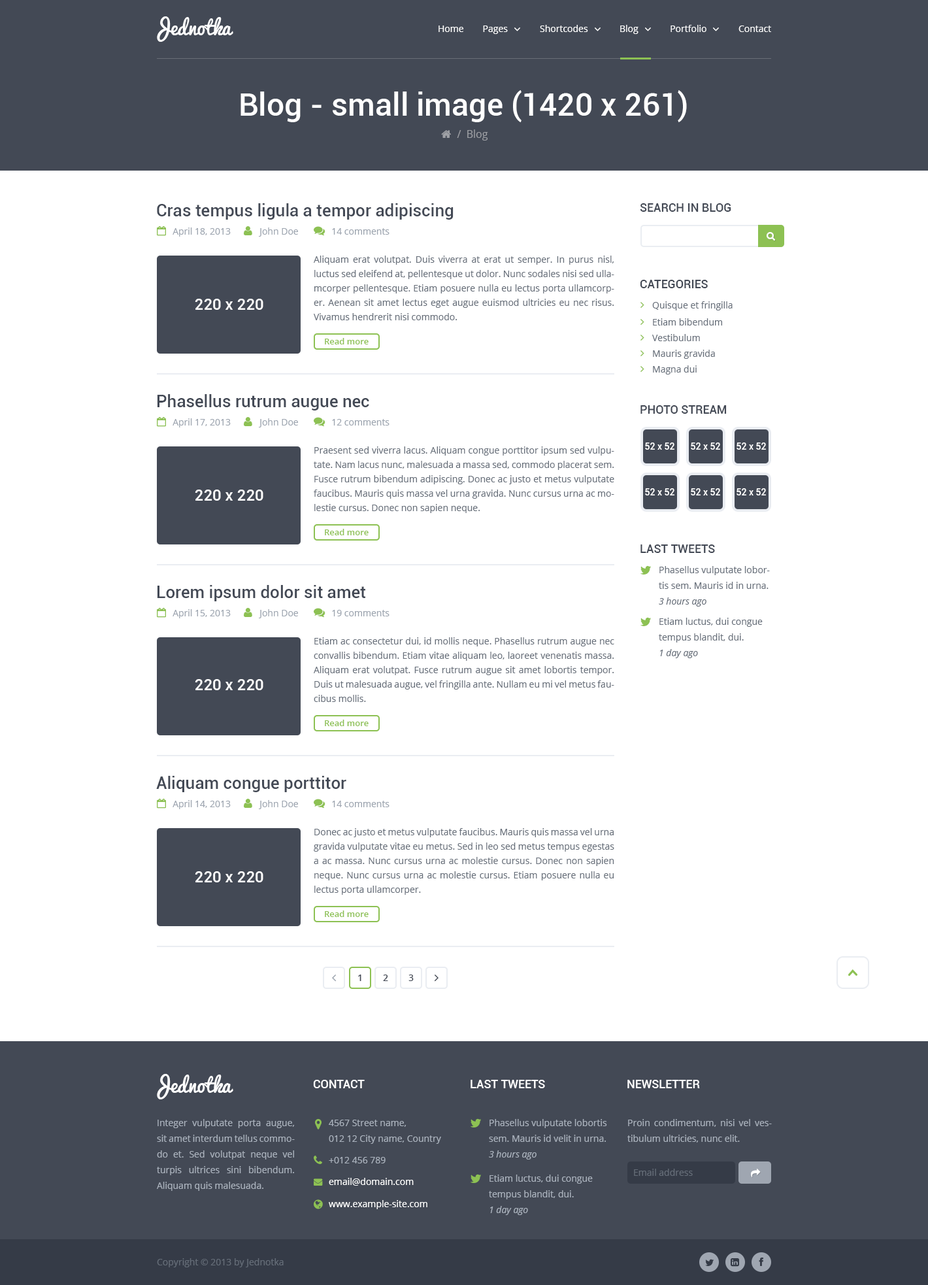
<style>
.page{position:relative;width:928px;height:1285px;background:#ffffff}
.page>*{position:absolute;margin:0}
.t1{font:19.6px "Pacifico";color:#ffffff}
.t2{font:9.1px "OpenSans";color:#ffffff}
.t3{font:31.4px "Roboto-Medium";color:#ffffff}
.t4{font:10.5px "OpenSans";color:#9fa1a6}
.t5{font:17px "Roboto-Medium";color:#434955}
.t6{font:11.8px "Roboto-Medium";color:#434955;text-transform:uppercase}
.t7{font:9.1px "OpenSans";color:#9ca4af}
.t8{font:9.1px/14.4px "OpenSans";color:#676f7a}
.t9{font:15.7px "Roboto-Medium";color:#ffffff}
.t10{font:9.1px "OpenSans";color:#676f7a}
.t11{font:8.5px "OpenSans-Semibold";color:#8dc153}
.t12{font:9.1px "Roboto-Medium";color:#ffffff}
.t13{font:9.1px/15.7px "OpenSans";color:#676f7a}
.t14{font:9.1px "OpenSans-Italic";color:#676f7a}
.t15{font:9.1px "OpenSans-Semibold";color:#434955}
.t16{font:11.8px "Roboto-Medium";color:#ffffff;text-transform:uppercase}
.t17{font:9.1px/15.7px "OpenSans";color:#aab2bd}
.t18{font:9.1px "OpenSans";color:#aab2bd}
.t19{font:9.1px "OpenSans-Italic";color:#aab2bd}
.t20{font:9.1px "OpenSans";color:#656d78}
</style>
<div class="page">
<p class="t1" style="left:157px;top:16px;width:76px;height:26px">Jednotka</p>
<p class="t2" style="left:439px;top:25px;width:24px;height:7px">Home</p>
<p class="t2" style="left:483px;top:25px;width:25px;height:9px">Pages</p>
<p class="t2" style="left:540px;top:25px;width:48px;height:7px">Shortcodes</p>
<p class="t2" style="left:620px;top:25px;width:19px;height:9px">Blog</p>
<p class="t2" style="left:671px;top:25px;width:35px;height:7px">Portfolio</p>
<p class="t2" style="left:739px;top:25px;width:32px;height:7px">Contact</p>
<p class="t3" style="left:241px;top:90px;width:446px;height:32px">Blog - small image (1420 x 261)</p>
<p class="t4" style="left:457px;top:129px;width:31px;height:12px">/  Blog</p>
<p class="t5" style="left:157px;top:203px;width:297px;height:17px">Cras tempus ligula a tempor adipiscing</p>
<p class="t6" style="left:640px;top:203px;width:91px;height:9px">Search in blog</p>
<p class="t7" style="left:173px;top:227px;width:58px;height:10px">April 18, 2013</p>
<p class="t7" style="left:259px;top:227px;width:39px;height:10px">John Doe</p>
<p class="t7" style="left:332px;top:228px;width:58px;height:7px">14 comments</p>
<p class="t8" style="left:314px;top:256px;width:300px;height:64px;text-align:justify">Aliquam erat volutpat. Duis viverra at erat ut semper. In purus nisl, luctus sed eleifend at, pellentesque ut dolor. Nunc sodales nisi sed ullamcorper pellentesque. Etiam posuere nulla eu lectus porta ullamcorper. Aenean sit amet lectus eget augue euismod ultricies eu nec risus. Vivamus hendrerit nisi commodo.</p>
<p class="t6" style="left:640px;top:280px;width:68px;height:8px">Categories</p>
<p class="t9" style="left:195px;top:299px;width:68px;height:11px">220 x 220</p>
<p class="t10" style="left:652px;top:301px;width:81px;height:9px">Quisque et fringilla</p>
<p class="t10" style="left:653px;top:318px;width:69px;height:7px">Etiam bibendum</p>
<p class="t11" style="left:325px;top:338px;width:44px;height:6px">Read more</p>
<p class="t10" style="left:652px;top:334px;width:48px;height:7px">Vestibulum</p>
<p class="t10" style="left:653px;top:350px;width:62px;height:9px">Mauris gravida</p>
<p class="t10" style="left:653px;top:365px;width:44px;height:9px">Magna dui</p>
<p class="t5" style="left:157px;top:394px;width:212px;height:16px">Phasellus rutrum augue nec</p>
<p class="t6" style="left:640px;top:405px;width:87px;height:9px">Photo stream</p>
<p class="t7" style="left:173px;top:418px;width:58px;height:9px">April 17, 2013</p>
<p class="t7" style="left:259px;top:418px;width:39px;height:9px">John Doe</p>
<p class="t7" style="left:332px;top:419px;width:58px;height:6px">12 comments</p>
<p class="t8" style="left:314px;top:446px;width:300px;height:67px;text-align:justify">Praesent sed viverra lacus. Aliquam congue porttitor ipsum sed vulputate. Nam lacus nunc, malesuada a massa sed, commodo placerat sem. Fusce rutrum bibendum adipiscing. Donec ac justo et metus vulputate faucibus. Mauris quis massa vel urna gravida. Nunc cursus urna ac molestie cursus. Donec non sapien neque.</p>
<p class="t12" style="left:645px;top:442px;width:29px;height:8px">52 x 52</p>
<p class="t12" style="left:691px;top:442px;width:29px;height:8px">52 x 52</p>
<p class="t12" style="left:737px;top:442px;width:29px;height:8px">52 x 52</p>
<p class="t9" style="left:195px;top:490px;width:68px;height:11px">220 x 220</p>
<p class="t12" style="left:645px;top:488px;width:29px;height:7px">52 x 52</p>
<p class="t12" style="left:691px;top:488px;width:29px;height:7px">52 x 52</p>
<p class="t12" style="left:737px;top:488px;width:29px;height:7px">52 x 52</p>
<p class="t11" style="left:325px;top:529px;width:44px;height:6px">Read more</p>
<p class="t6" style="left:640px;top:544px;width:75px;height:9px">Last tweets</p>
<p class="t13" style="left:659px;top:566px;width:111px;height:23px">Phasellus vulputate lobortis sem. Mauris id in urna.</p>
<p class="t5" style="left:157px;top:585px;width:209px;height:16px">Lorem ipsum dolor sit amet</p>
<p class="t14" style="left:659px;top:597px;width:47px;height:9px">3 hours ago</p>
<p class="t7" style="left:173px;top:609px;width:58px;height:9px">April 15, 2013</p>
<p class="t7" style="left:259px;top:609px;width:39px;height:9px">John Doe</p>
<p class="t7" style="left:332px;top:610px;width:58px;height:6px">19 comments</p>
<p class="t13" style="left:659px;top:618px;width:104px;height:24px">Etiam luctus, dui congue tempus blandit, dui.</p>
<p class="t8" style="left:314px;top:637px;width:300px;height:65px;text-align:justify">Etiam ac consectetur dui, id mollis neque. Phasellus rutrum augue nec convallis bibendum. Etiam vitae aliquam leo, laoreet venenatis massa. Aliquam erat volutpat. Fusce rutrum augue sit amet lobortis tempor. Duis ut malesuada augue, vel fringilla ante. Nullam eu mi vel metus faucibus mollis.</p>
<p class="t14" style="left:660px;top:649px;width:38px;height:9px">1 day ago</p>
<p class="t9" style="left:195px;top:679px;width:68px;height:11px">220 x 220</p>
<p class="t11" style="left:325px;top:720px;width:44px;height:6px">Read more</p>
<p class="t5" style="left:156px;top:776px;width:190px;height:16px">Aliquam congue porttitor</p>
<p class="t7" style="left:173px;top:800px;width:58px;height:9px">April 14, 2013</p>
<p class="t7" style="left:259px;top:800px;width:39px;height:9px">John Doe</p>
<p class="t7" style="left:332px;top:801px;width:58px;height:6px">14 comments</p>
<p class="t8" style="left:314px;top:828px;width:300px;height:67px;text-align:justify">Donec ac justo et metus vulputate faucibus. Mauris quis massa vel urna gravida vulputate vitae eu metus. Sed in leo sed metus tempus egestas a ac massa. Nunc cursus urna ac molestie cursus. Donec non sapien neque. Nunc cursus urna ac molestie cursus. Etiam posuere nulla eu lectus porta ullamcorper.</p>
<p class="t9" style="left:195px;top:871px;width:68px;height:11px">220 x 220</p>
<p class="t11" style="left:325px;top:910px;width:44px;height:7px">Read more</p>
<p class="t15" style="left:358px;top:974px;width:3px;height:7px">1</p>
<p class="t15" style="left:383px;top:974px;width:5px;height:7px">2</p>
<p class="t15" style="left:408px;top:974px;width:6px;height:7px">3</p>
<p class="t1" style="left:157px;top:1074px;width:76px;height:25px">Jednotka</p>
<p class="t16" style="left:313px;top:1080px;width:52px;height:8px">CONTACT</p>
<p class="t16" style="left:471px;top:1080px;width:74px;height:8px">Last tweets</p>
<p class="t16" style="left:627px;top:1080px;width:73px;height:8px">Newsletter</p>
<p class="t17" style="left:157px;top:1119px;width:138px;height:72px;text-align:justify">Integer vulputate porta augue, sit amet interdum tellus commodo et. Sed volutpat neque vel turpis ultrices sini bibendum. Aliquam quis malesuada.</p>
<p class="t17" style="left:329px;top:1120px;width:112px;height:24px">4567 Street name, <br>012 12 City name, Country</p>
<p class="t17" style="left:489px;top:1119px;width:118px;height:23px">Phasellus vulputate lobortis sem. Mauris id velit in urna.</p>
<p class="t17" style="left:627px;top:1119px;width:145px;height:23px;text-align:justify">Proin condimentum, nisi vel vestibulum ultricies, nunc elit.</p>
<p class="t18" style="left:329px;top:1157px;width:57px;height:6px">+012 456 789</p>
<p class="t19" style="left:489px;top:1150px;width:48px;height:9px">3 hours ago</p>
<p class="t20" style="left:634px;top:1169px;width:59px;height:7px">Email address</p>
<p class="t2" style="left:329px;top:1178px;width:85px;height:8px">email@domain.com</p>
<p class="t17" style="left:489px;top:1174px;width:104px;height:25px">Etiam luctus, dui congue tempus blandit, dui.</p>
<p class="t2" style="left:329px;top:1200px;width:98px;height:9px">www.example-site.com</p>
<p class="t19" style="left:490px;top:1206px;width:38px;height:9px">1 day ago</p>
<p class="t20" style="left:157px;top:1258px;width:127px;height:9px">Copyright © 2013 by Jednotka</p>
</div>
